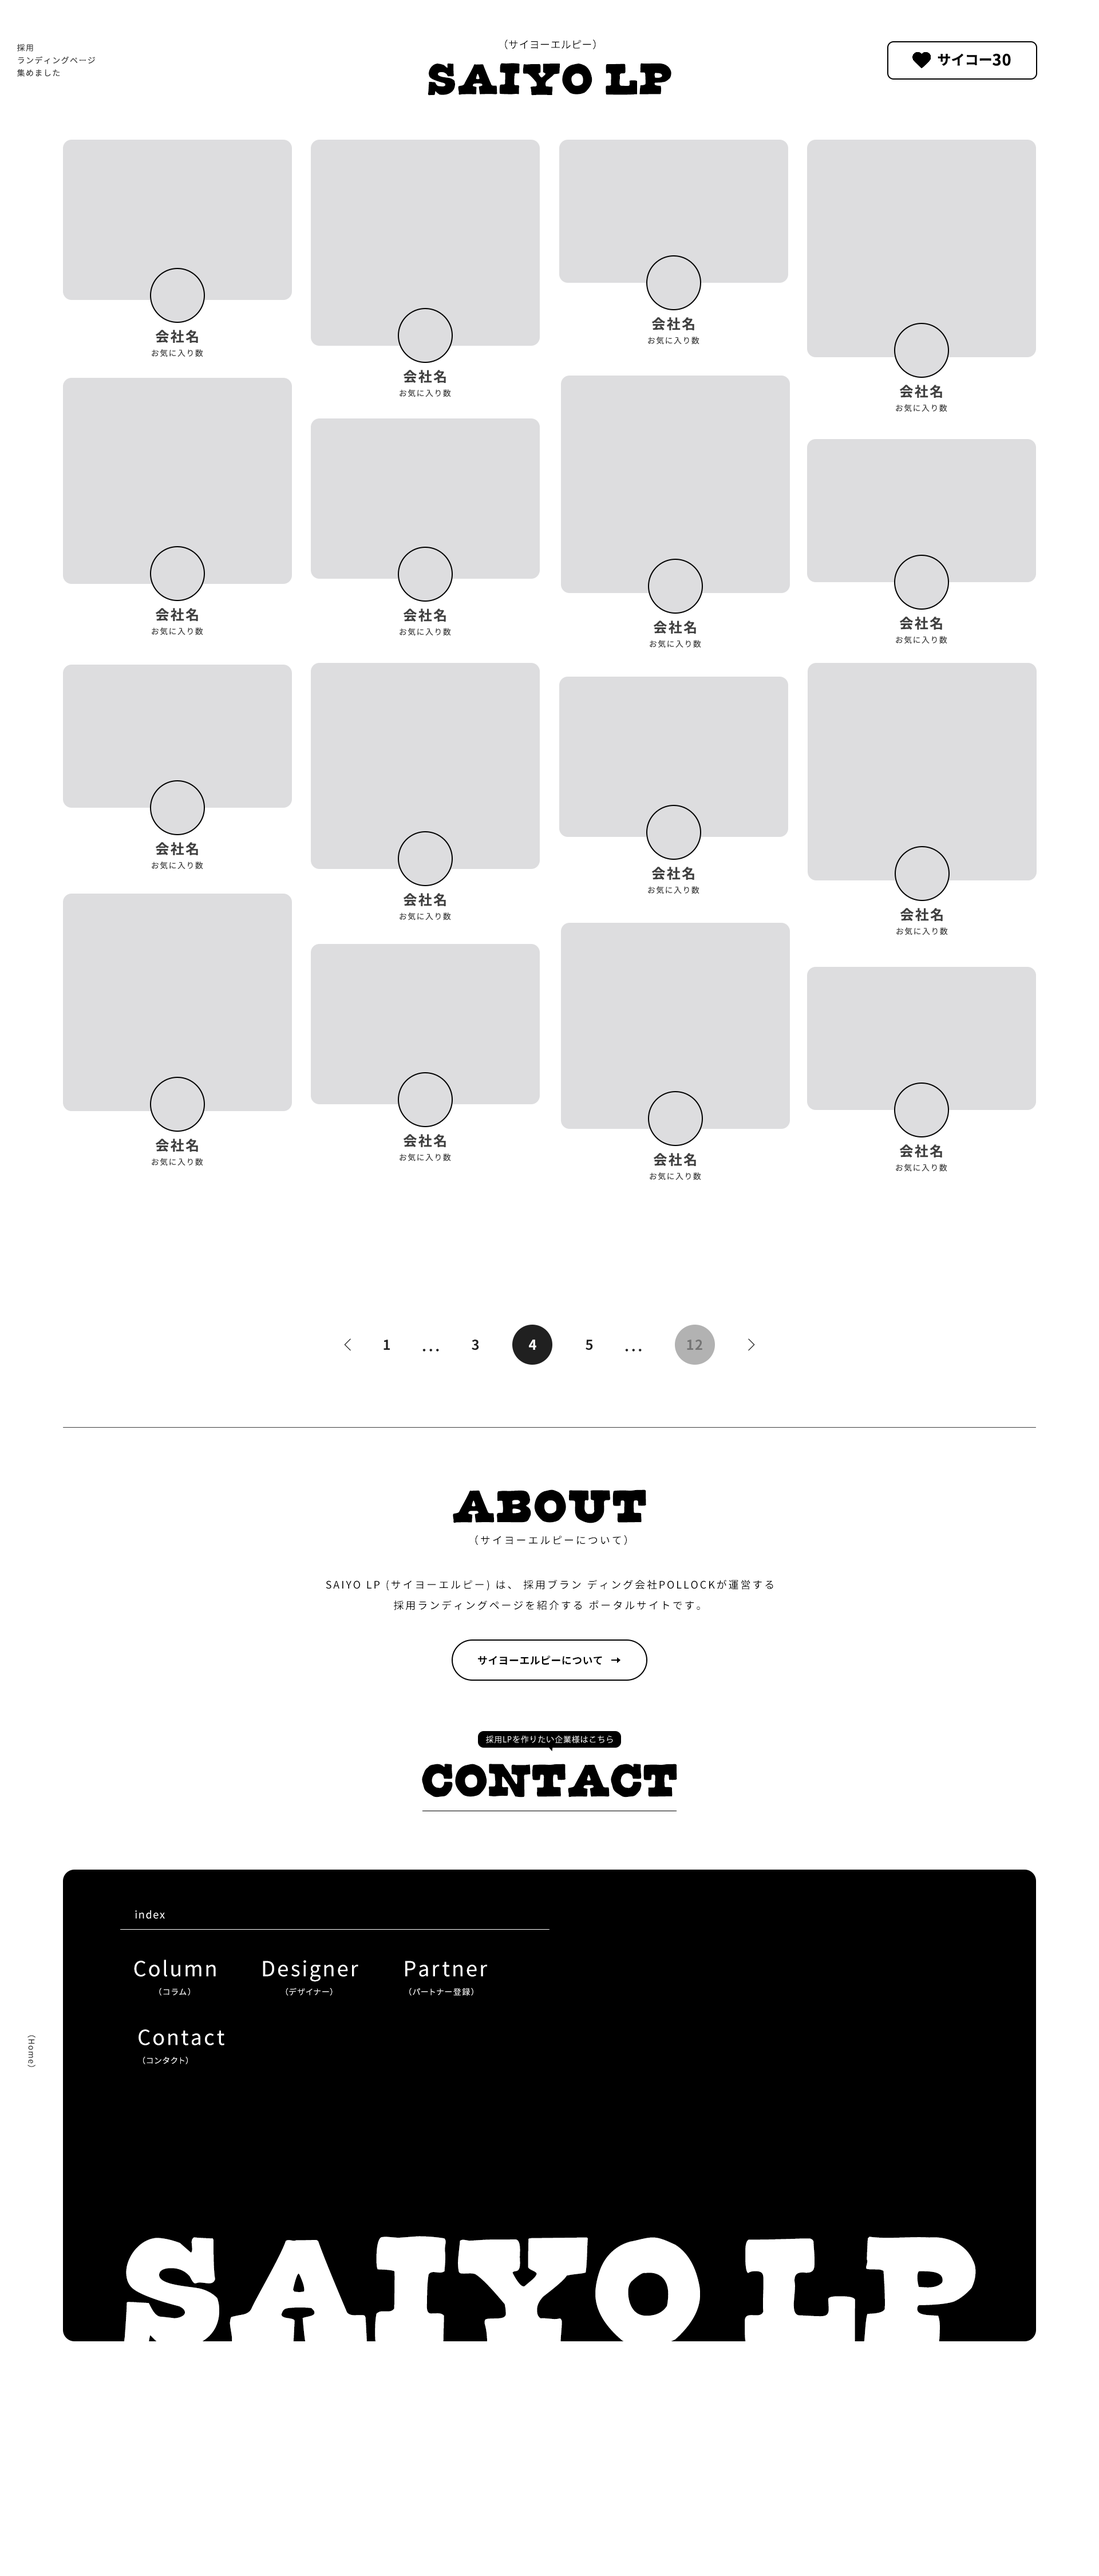
<style>
.page{position:relative;width:1099px;height:2576px;background:#ffffff}
.page>*{position:absolute;margin:0}
.t1{font:10.3px/14.9px "NotoSansCJKjp-Regular";letter-spacing:0.02em;color:#000000}
.t2{font:48.7px/14.9px "CornDog";letter-spacing:0.02em;color:#000000}
.t3{font:48.7px/14.9px "CornDog";letter-spacing:-0.22em;color:#000000}
.t4{font:8px/12.6px "NotoSansCJKjp-Regular";letter-spacing:0.1em;color:#404040}
.t5{font:13.7px "NotoSansCJKjp-Bold";color:#000000}
.t6{font:15.5px "NotoSansCJKjp-Bold";letter-spacing:0.04em;color:#000000}
.t7{font:8px/19.5px "NotoSansCJKjp-Regular";letter-spacing:0.1em;color:#404040}
.t8{font:13.7px/19.5px "NotoSansCJKjp-Bold";letter-spacing:0.1em;color:#404040}
.t9{font:13.7px "NotoSansCJKjp-Bold";letter-spacing:0.16em;color:#202020}
.t10{font:13.7px "NotoSansCJKjp-Bold";letter-spacing:0.16em;color:#ffffff}
.t11{font:13.7px "NotoSansCJKjp-Bold";letter-spacing:0.06em;color:#747474}
.t12{font:10.3px/55px "NotoSansCJKjp-Regular";letter-spacing:0.16em;color:#000000}
.t13{font:51.5px/55px "CornDog";letter-spacing:0.02em;color:#000000}
.t14{font:10.3px/20.6px "NotoSansCJKjp-Regular";letter-spacing:0.16em;color:#000000}
.t15{font:10.3px "NotoSansCJKjp-Bold";letter-spacing:0.02em;color:#000000}
.t16{font:8px "KozGoPr6N-Regular";letter-spacing:0.06em;color:#ffffff}
.t17{font:51.5px "CornDog";color:#000000}
.t18{font:10.3px "NotoSansCJKjp-Regular";letter-spacing:0.1em;color:#ffffff}
.t19{font:20.6px/29.8px "NotoSansCJKjp-Regular";letter-spacing:0.1em;color:#ffffff}
.t20{font:8px/3.4px "NotoSansCJKjp-Regular";letter-spacing:0.14em;color:#ffffff}
.t21{font:8px/3.4px "NotoSansCJKjp-Regular";letter-spacing:0.1em;color:#ffffff}
.t22{font:8px "NotoSansCJKjp-Regular";letter-spacing:0.1em;color:#404040}
.t23{font:171px "CornDog";letter-spacing:0.02em;color:#ffffff}
.t24{font:171px "CornDog";letter-spacing:-0.24em;color:#ffffff}
</style>
<div class="page">
<p class="t1" style="left:428px;top:39px;width:243px;height:57px;text-align:center">（サイヨーエルピー）<br><span class="t2">SAIY</span><span class="t3">O</span><span class="t2"> LP</span></p>
<p class="t4" style="left:17px;top:44px;width:78px;height:33px">採用<br>ランディングページ<br>集めました</p>
<p class="t5" style="left:938px;top:53px;width:73px;height:13px">サイコー<span class="t6">30</span></p>
<p class="t7" style="left:648px;top:317px;width:52px;height:28px;text-align:center"><span class="t8">会社名<br></span>お気に入り数</p>
<p class="t7" style="left:152px;top:330px;width:51px;height:27px;text-align:center"><span class="t8">会社名<br></span>お気に入り数</p>
<p class="t7" style="left:400px;top:370px;width:51px;height:27px;text-align:center"><span class="t8">会社名<br></span>お気に入り数</p>
<p class="t7" style="left:896px;top:385px;width:51px;height:27px;text-align:center"><span class="t8">会社名<br></span>お気に入り数</p>
<p class="t7" style="left:152px;top:608px;width:51px;height:27px;text-align:center"><span class="t8">会社名<br></span>お気に入り数</p>
<p class="t7" style="left:400px;top:609px;width:51px;height:27px;text-align:center"><span class="t8">会社名<br></span>お気に入り数</p>
<p class="t7" style="left:896px;top:617px;width:51px;height:27px;text-align:center"><span class="t8">会社名<br></span>お気に入り数</p>
<p class="t7" style="left:650px;top:621px;width:51px;height:27px;text-align:center"><span class="t8">会社名<br></span>お気に入り数</p>
<p class="t7" style="left:152px;top:842px;width:51px;height:28px;text-align:center"><span class="t8">会社名<br></span>お気に入り数</p>
<p class="t7" style="left:648px;top:867px;width:52px;height:27px;text-align:center"><span class="t8">会社名<br></span>お気に入り数</p>
<p class="t7" style="left:400px;top:893px;width:51px;height:27px;text-align:center"><span class="t8">会社名<br></span>お気に入り数</p>
<p class="t7" style="left:896px;top:908px;width:52px;height:27px;text-align:center"><span class="t8">会社名<br></span>お気に入り数</p>
<p class="t7" style="left:152px;top:1139px;width:51px;height:27px;text-align:center"><span class="t8">会社名<br></span>お気に入り数</p>
<p class="t7" style="left:400px;top:1134px;width:51px;height:27px;text-align:center"><span class="t8">会社名<br></span>お気に入り数</p>
<p class="t7" style="left:896px;top:1144px;width:51px;height:28px;text-align:center"><span class="t8">会社名<br></span>お気に入り数</p>
<p class="t7" style="left:650px;top:1153px;width:51px;height:27px;text-align:center"><span class="t8">会社名<br></span>お気に入り数</p>
<p class="t9" style="left:384px;top:1340px;width:6px;height:10px">1</p>
<p class="t9" style="left:422px;top:1349px;width:17px;height:3px">...</p>
<p class="t9" style="left:472px;top:1340px;width:7px;height:10px">3</p>
<p class="t10" style="left:529px;top:1340px;width:7px;height:10px">4</p>
<p class="t9" style="left:586px;top:1340px;width:7px;height:10px">5</p>
<p class="t9" style="left:625px;top:1349px;width:17px;height:3px">...</p>
<p class="t11" style="left:687px;top:1340px;width:15px;height:10px">12</p>
<p class="t12" style="left:453px;top:1490px;width:193px;height:55px;text-align:center"><span class="t13">ABOUT<br></span>（サイヨーエルピーについて）</p>
<p class="t14" style="left:326px;top:1579px;width:447px;height:31px;text-align:center">SAIYO LP (サイヨーエルピー) は、 採用ブラン ディング会社POLLOCKが運営する<br>採用ランディングページを紹介する ポータルサイトです。</p>
<p class="t15" style="left:478px;top:1656px;width:124px;height:9px">サイヨーエルピーについて</p>
<p class="t16" style="left:486px;top:1735px;width:127px;height:9px">採用LPを作りたい企業様はこちら</p>
<p class="t17" style="left:422px;top:1764px;width:255px;height:33px">CONTACT</p>
<p class="t18" style="left:135px;top:1910px;width:30px;height:9px">index</p>
<p class="t19" style="left:134px;top:1959px;width:82px;height:37px;text-align:center">Column<br><span class="t20">（コラム）</span></p>
<p class="t19" style="left:263px;top:1960px;width:95px;height:36px;text-align:center">Designer<br><span class="t21">（デザイナー）</span></p>
<p class="t21" style="left:405px;top:1961px;width:83px;height:35px;text-align:center"><span class="t19"> Partner<br></span>（パートナー登録）</p>
<p class="t19" style="left:139px;top:2029px;width:85px;height:35px">Contact<br><span class="t21">（コンタクト）</span></p>
<p class="t22" style="left:27px;top:2035px;width:8px;height:32px;rotate:90deg">（Home）</p>
<p class="t23" style="left:124px;top:2236px;width:852px;height:113px">SAIY<span class="t24">O</span> LP</p>
</div>
